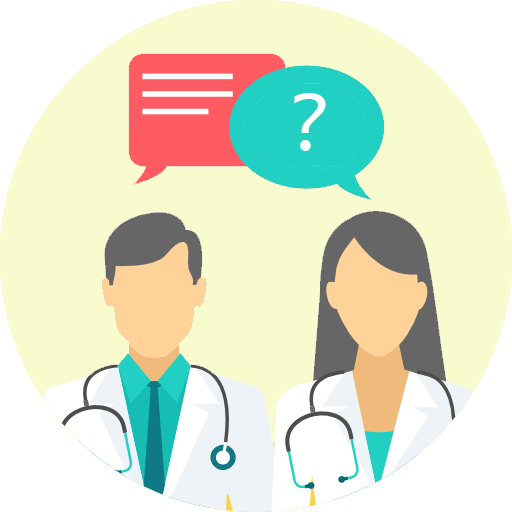
<style>
.page{position:relative;width:512px;height:512px;background:#f8fbcd}
.page>*{position:absolute;margin:0}
.t1{font:75px "Monaco";color:#fefefe}
</style>
<div class="page">
<p class="t1" style="left:294px;top:93px;width:32px;height:58px">?</p>
</div>
